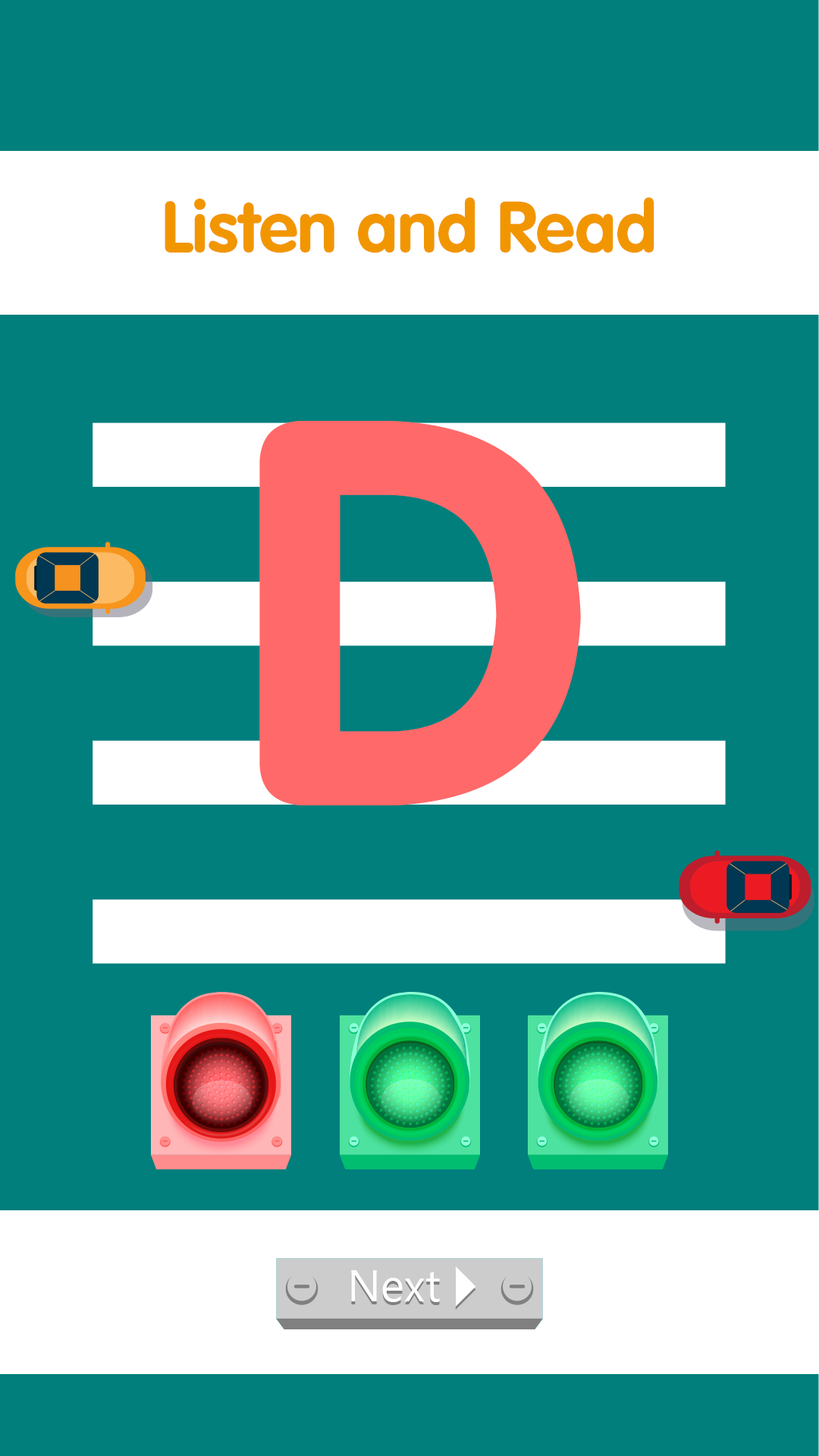
<style>
.page{position:relative;width:819px;height:1456px;background:#007f7d}
.page>*{position:absolute;margin:0}
.t1{font:71.6px "FZY4JW--GB1-0";color:#f29600}
.t2{font:540.3px "FZY4JW--GB1-0";letter-spacing:0.04em;color:#ff6969}
.t3{font:44.9px "SegoeUI";color:#ffffff}
</style>
<div class="page">
<p class="t1" style="left:165px;top:197px;width:489px;height:56px">Listen and Read</p>
<p class="t1" style="left:165px;top:197px;width:489px;height:56px">Listen and Read</p>
<p class="t2" style="left:259px;top:421px;width:322px;height:384px">D</p>
<p class="t3" style="left:351px;top:1270px;width:89px;height:32px">Next</p>
<p class="t3" style="left:351px;top:1270px;width:89px;height:32px">Next</p>
</div>
